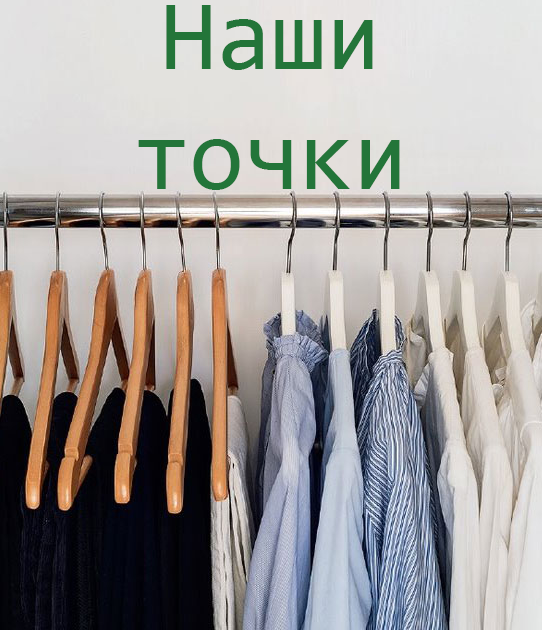
<style>
.page{position:relative;width:542px;height:630px}
.page>*{position:absolute;margin:0}
.t1{font:100px "Consolas";color:#237539}
</style>
<div class="page">
<p class="t1" style="left:138px;top:5px;width:262px;height:185px;text-align:center">Наши точки</p>
</div>
